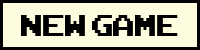
<style>
.page{position:relative;width:200px;height:50px;background:#fefcde}
.page>*{position:absolute;margin:0}
.t1{font:41.7px "ArcadeClassic";color:#000000;scale:0.95 1}
</style>
<div class="page">
<p class="t1" style="left:21px;top:15px;width:157px;height:21px">New game</p>
</div>
